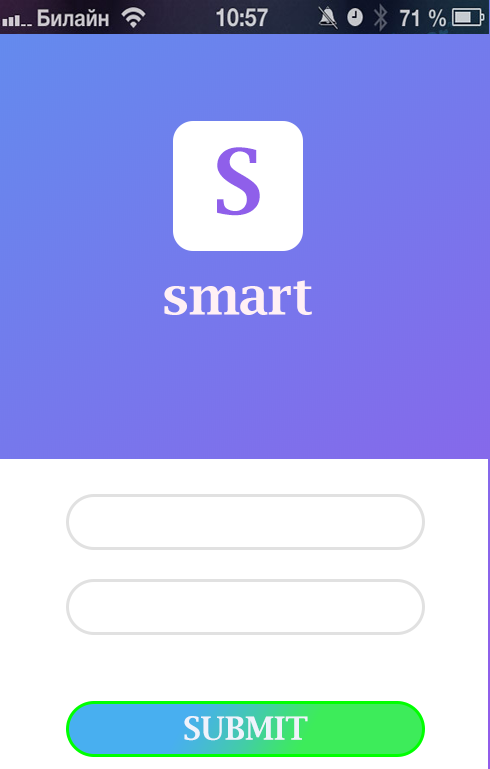
<style>
.page{position:relative;width:490px;height:769px;background:#ffffff}
.page>*{position:absolute;margin:0}
.t1{font:90px "LucidaBright-Demi";color:#8f5fea}
.t2{font:52px "LucidaBright-Demi";color:#fff0f5}
.t3{font:32px "LucidaBright-Demi";color:#eff3fc}
</style>
<div class="page">
<p class="t1" style="left:217px;top:147px;width:43px;height:69px">S</p>
<p class="t2" style="left:164px;top:280px;width:148px;height:35px">smart</p>
<p class="t3" style="left:184px;top:716px;width:124px;height:25px">SUBMIT</p>
</div>
